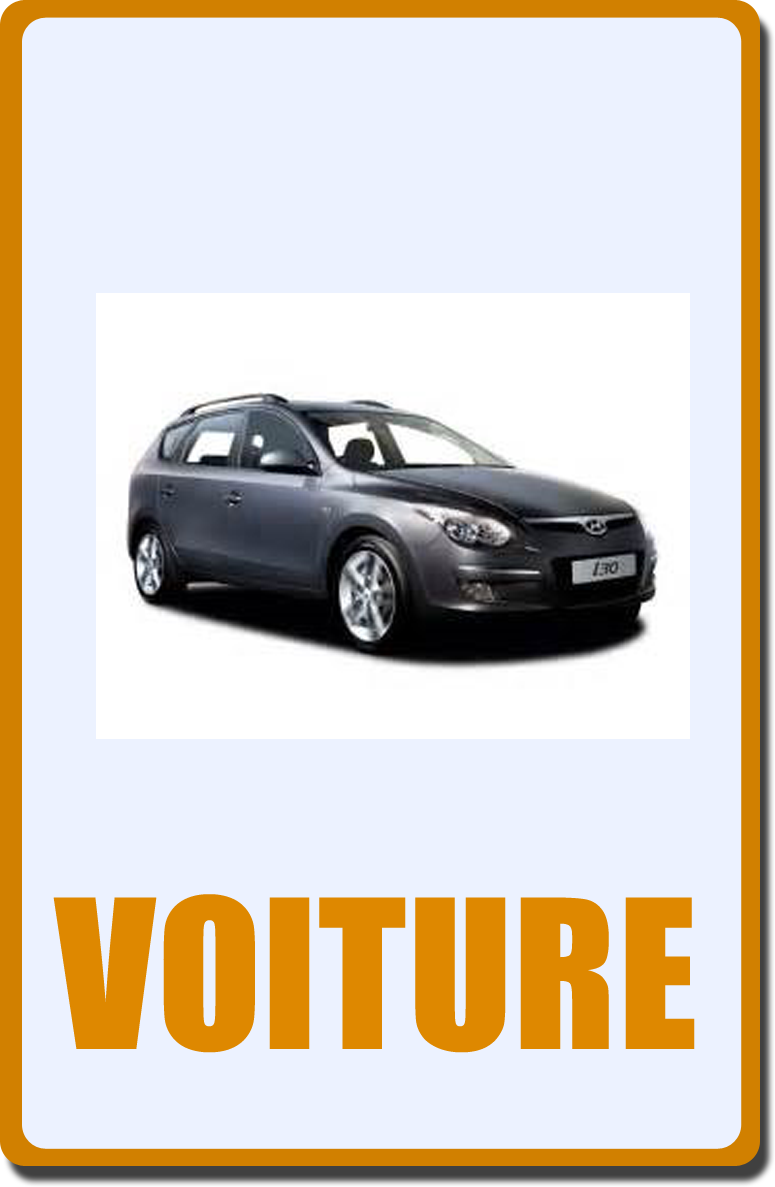
<style>
.page{position:relative;width:775px;height:1187px;background:#ecf2ff}
.page>*{position:absolute;margin:0}
.t1{font:191.7px "Impact";letter-spacing:0.005em;color:#de8800}
</style>
<div class="page">
<p class="t1" style="left:53px;top:894px;width:642px;height:159px">VOITURE</p>
</div>
